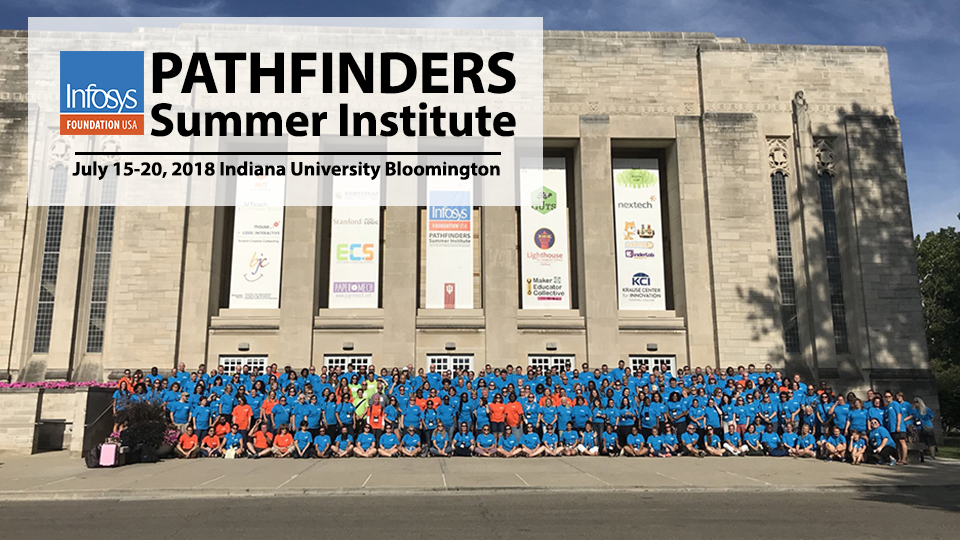
<style>
.page{position:relative;width:960px;height:540px}
.page>*{position:absolute;margin:0}
.t1{font:48px/43px "MyriadPro-Bold";letter-spacing:-0.005em;color:#000000}
.t2{font:60px/43px "MyriadPro-Bold";letter-spacing:-0.005em;color:#000000}
.t3{font:20px "MyriadPro-Bold";letter-spacing:-0.005em;color:#000000}
</style>
<div class="page">
<p class="t1" style="left:150px;top:51px;width:366px;height:86px"><span class="t2">PATHFINDERS<br></span>Summer Institute</p>
<p class="t3" style="left:72px;top:161px;width:428px;height:19px">July 15-20, 2018 Indiana University Bloomington</p>
</div>
